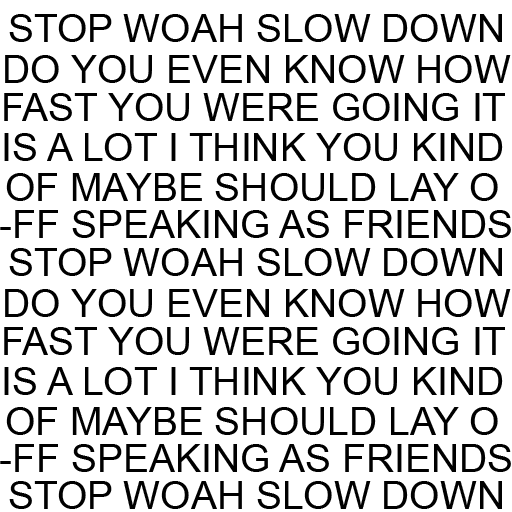
<style>
.page{position:relative;width:512px;height:512px;background:#ffffff}
.page>*{position:absolute;margin:0}
.t1{font:39px "ArialMT";color:#000000}
</style>
<div class="page">
<p class="t1" style="left:9px;top:14px;width:493px;height:28px">STOP WOAH SLOW DOWN</p>
<p class="t1" style="left:5px;top:55px;width:506px;height:28px">DO YOU EVEN KNOW HOW</p>
<p class="t1" style="left:4px;top:93px;width:501px;height:28px">FAST YOU WERE GOING IT</p>
<p class="t1" style="left:4px;top:133px;width:499px;height:28px">IS A LOT I THINK YOU KIND</p>
<p class="t1" style="left:6px;top:173px;width:492px;height:28px">OF MAYBE SHOULD LAY O</p>
<p class="t1" style="left:0px;top:210px;width:511px;height:28px">-FF SPEAKING AS FRIENDS</p>
<p class="t1" style="left:9px;top:248px;width:493px;height:28px">STOP WOAH SLOW DOWN</p>
<p class="t1" style="left:5px;top:289px;width:506px;height:28px">DO YOU EVEN KNOW HOW</p>
<p class="t1" style="left:4px;top:327px;width:501px;height:28px">FAST YOU WERE GOING IT</p>
<p class="t1" style="left:4px;top:367px;width:499px;height:28px">IS A LOT I THINK YOU KIND</p>
<p class="t1" style="left:6px;top:407px;width:492px;height:28px">OF MAYBE SHOULD LAY O</p>
<p class="t1" style="left:0px;top:444px;width:511px;height:28px">-FF SPEAKING AS FRIENDS</p>
<p class="t1" style="left:9px;top:481px;width:493px;height:28px">STOP WOAH SLOW DOWN</p>
</div>
